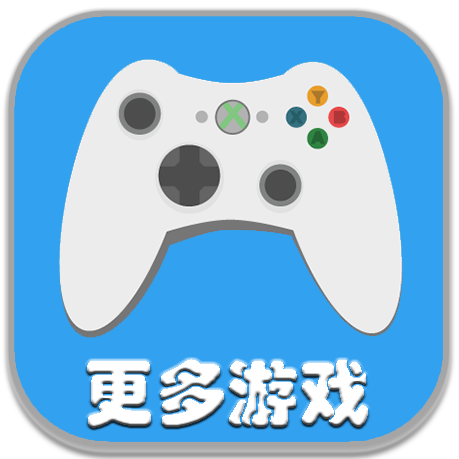
<style>
.page{position:relative;width:459px;height:459px;background:#32a1f0}
.page>*{position:absolute;margin:0}
.t1{font:72px "STHupo";color:#ffffff}
</style>
<div class="page">
<p class="t1" style="left:87px;top:359px;width:281px;height:69px">更多游戏</p>
</div>
